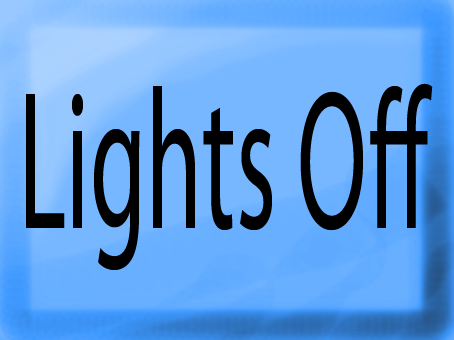
<style>
.page{position:relative;width:454px;height:340px}
.page>*{position:absolute;margin:0}
.t1{font:199.5px "MyriadPro-Regular";color:#000000;scale:0.51 1}
</style>
<div class="page">
<p class="t1" style="left:26px;top:83px;width:407px;height:187px">Lights Off</p>
</div>
